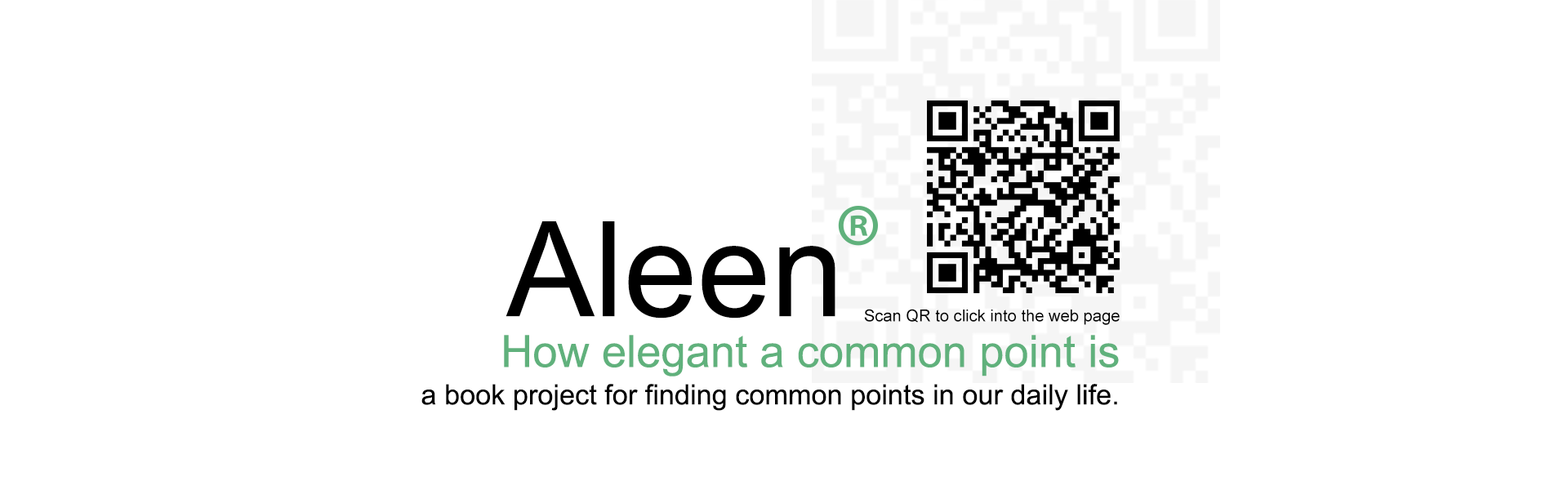
<style>
.page{position:relative;width:1568px;height:490px;background:#ffffff}
.page>*{position:absolute;margin:0}
.t1{font:132.5px "ArialMT";color:#000000}
.t2{font:16.5px "ArialMT";color:#000000}
.t3{font:44.4px "ArialMT";color:#60b17c}
.t4{font:28px "ArialMT";color:#000000}
</style>
<div class="page">
<p class="t1" style="left:506px;top:221px;width:329px;height:97px">Aleen</p>
<p class="t2" style="left:864px;top:309px;width:256px;height:16px">Scan QR to click into the web page</p>
<p class="t3" style="left:504px;top:335px;width:615px;height:41px">How elegant a common point is</p>
<p class="t4" style="left:421px;top:384px;width:696px;height:27px">a book project for finding common points in our daily life.</p>
</div>
